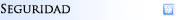
<style>
.page{position:relative;width:177px;height:20px}
.page>*{position:absolute;margin:0}
.t1{font:12px "TrajanPro-Regular";color:#050505}
</style>
<div class="page">
<p class="t1" style="left:1px;top:3px;width:69px;height:11px">Seguridad</p>
</div>
